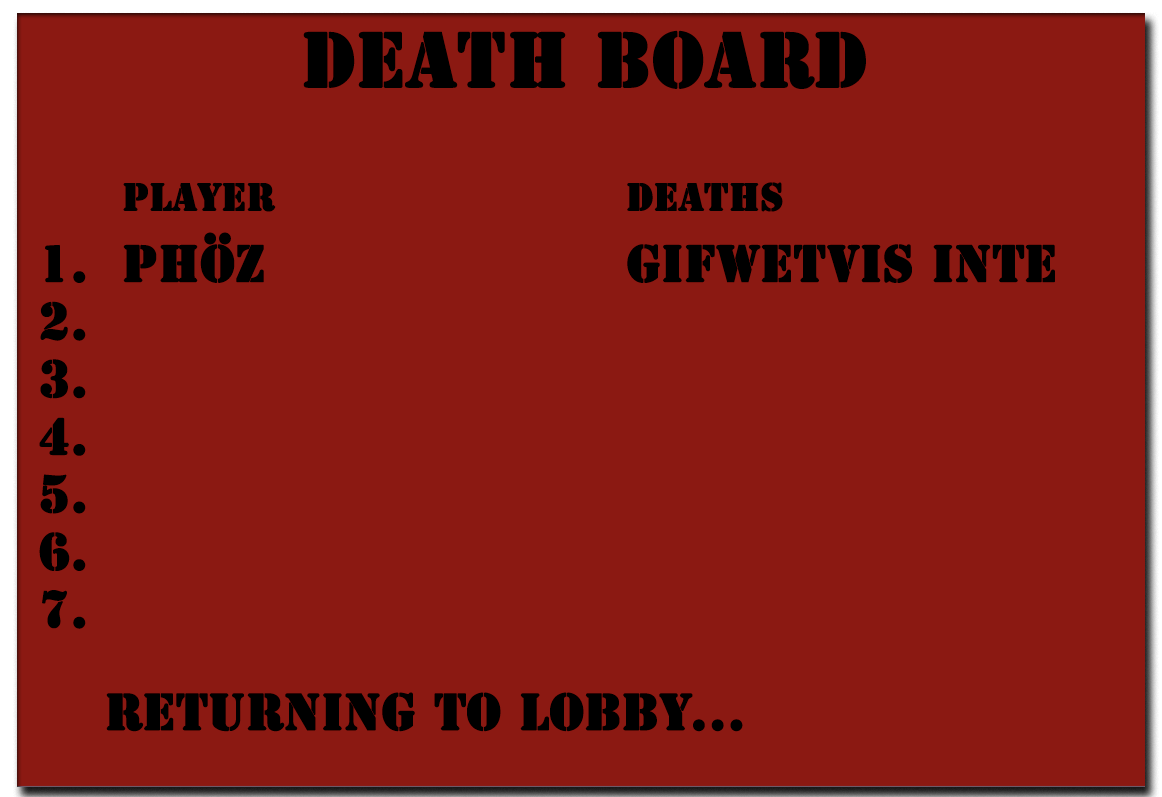
<style>
.page{position:relative;width:1162px;height:797px;background:#8b1912}
.page>*{position:absolute;margin:0}
.t1{font:72px "StencilStd";color:#000000;font-weight:bold}
.t2{font:36px "StencilStd";color:#000000;font-weight:bold}
.t3{font:48px "StencilStd";color:#000000;font-weight:bold}
.t4{font:47.9px "StencilStd";color:#000000;font-weight:bold}
</style>
<div class="page">
<p class="t1" style="left:303px;top:30px;width:563px;height:59px">Death BOARD</p>
<p class="t2" style="left:123px;top:182px;width:660px;height:30px">player          Deaths</p>
<p class="t3" style="left:123px;top:232px;width:932px;height:51px">phöz           Gifwetvis inte</p>
<p class="t3" style="left:39px;top:244px;width:47px;height:385px">1.<br>2.<br>3.<br>4.<br>5.<br>6.<br>7.</p>
<p class="t4" style="left:106px;top:692px;width:637px;height:40px">Returning to lobby...</p>
</div>
